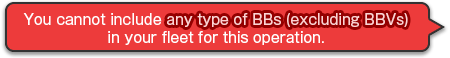
<style>
.page{position:relative;width:450px;height:58px;background:#ed3b3b}
.page>*{position:absolute;margin:0}
.t1{font:14px/18px "GothicMB101Pro-Regular";color:#ffffff}
.t2{font:14px/18px "GothicMB101Pro-Regular";color:#ffd3d3}
</style>
<div class="page">
<p class="t1" style="left:23px;top:13px;width:385px;height:32px;text-align:center">You cannot include <span class="t2">any type of BBs (excluding BBVs)<br></span>in your fleet for this operation.</p>
<p class="t1" style="left:23px;top:13px;width:385px;height:32px;text-align:center">You cannot include <span class="t2">any type of BBs (excluding BBVs)<br></span>in your fleet for this operation.</p>
</div>
